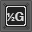
<style>
.page{position:relative;width:32px;height:32px;background:#212121}
.page>*{position:absolute;margin:0}
.t1{font:12px "Calibri";color:#dadada}
.t2{font:12px "Helvetica-Bold";color:#dadada}
</style>
<div class="page">
<p class="t1" style="left:7px;top:12px;width:17px;height:9px">1/2<span class="t2">G</span></p>
</div>
